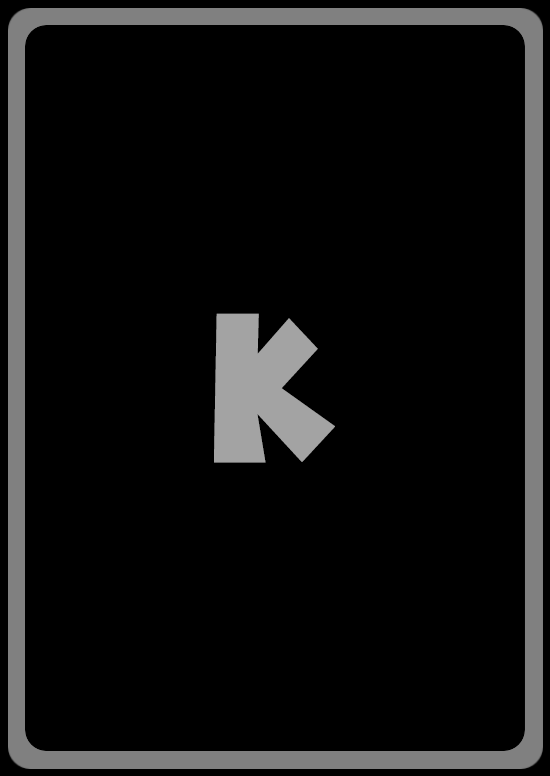
<style>
.page{position:relative;width:550px;height:776px;background:#000000}
.page>*{position:absolute;margin:0}
.t1{font:200px "SuperMarioGalaxy";letter-spacing:0.05em;color:#a3a3a3}
</style>
<div class="page">
<p class="t1" style="left:214px;top:313px;width:121px;height:150px">K</p>
</div>
